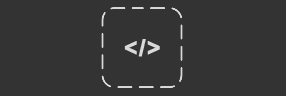
<style>
.page{position:relative;width:286px;height:96px;background:#333333}
.page>*{position:absolute;margin:0}
.t1{font:22.6px "Arial-BoldMT";letter-spacing:0.05em;color:#d9d9d9;font-weight:bold}
</style>
<div class="page">
<p class="t1" style="left:124px;top:39px;width:36px;height:18px">&lt;/&gt;</p>
</div>
